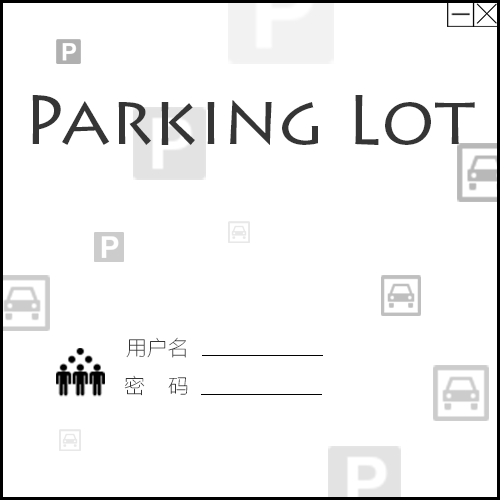
<style>
.page{position:relative;width:500px;height:500px;background:#ffffff}
.page>*{position:absolute;margin:0}
.t1{font:69.4px "LithosPro-Regular";color:#353535}
.t2{font:20.9px "FZLTCXHJW--GB1-0";color:#353535}
</style>
<div class="page">
<p class="t1" style="left:32px;top:95px;width:443px;height:50px">Parking Lot</p>
<p class="t2" style="left:126px;top:337px;width:60px;height:21px">用户名</p>
<p class="t2" style="left:124px;top:375px;width:64px;height:21px">密    码</p>
</div>
